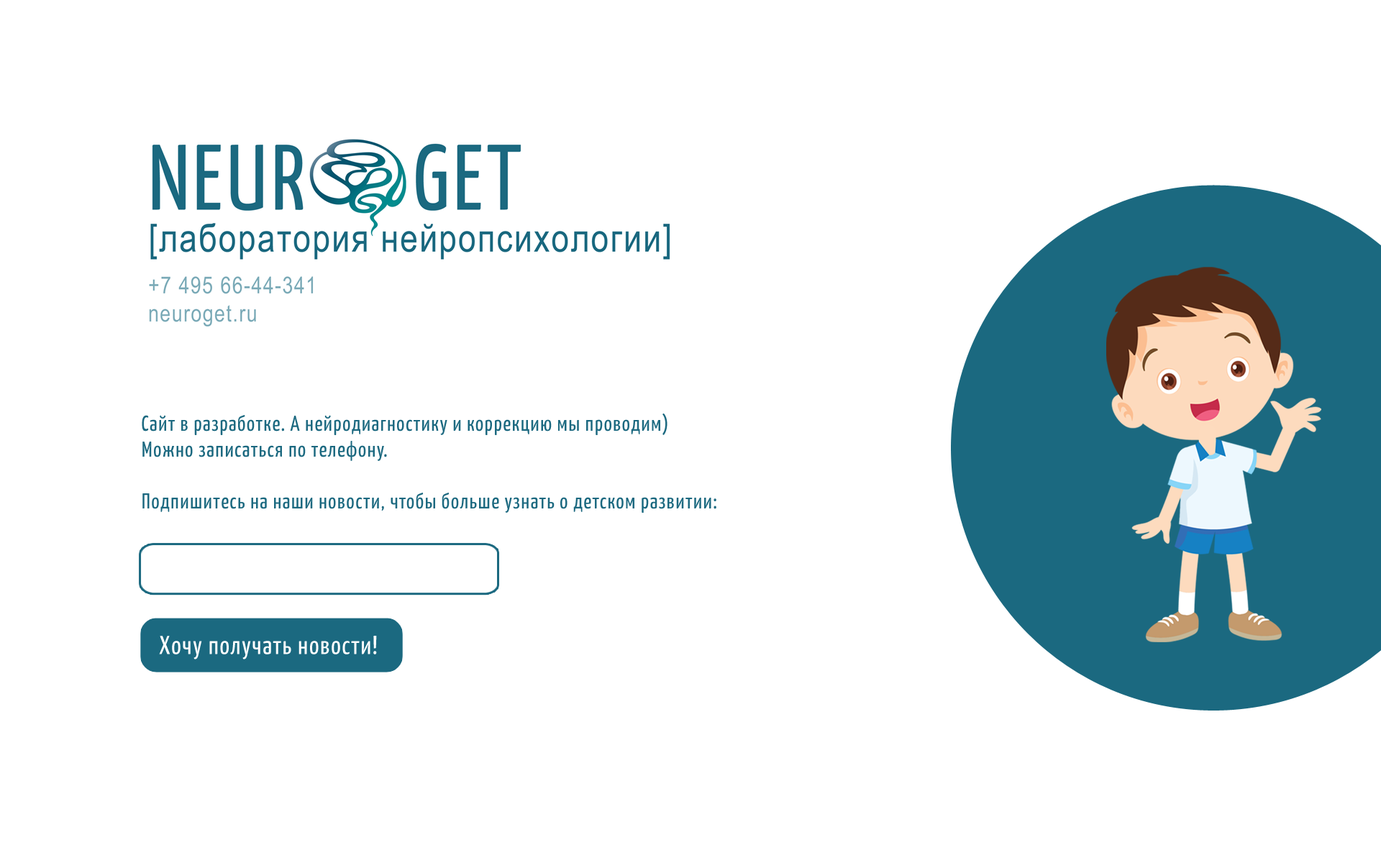
<style>
.page{position:relative;width:1381px;height:863px;background:#ffffff}
.page>*{position:absolute;margin:0}
.t1{font:21.6px "YanoneKaffeesatz-Regular";letter-spacing:0.045em;color:#1c6980}
.t2{font:25.9px "YanoneKaffeesatz-Regular";letter-spacing:0.045em;color:#ffffff}
</style>
<div class="page">
<p class="t1" style="left:142px;top:414px;width:575px;height:99px">Сайт в разработке. А нейродиагностику и коррекцию мы проводим) Можно записаться по телефону.<br><br>Подпишитесь на наши новости, чтобы больше узнать о детском развитии:</p>
<p class="t2" style="left:159px;top:636px;width:218px;height:24px">Хочу получать новости!</p>
</div>
